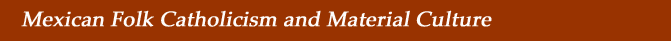
<style>
.page{position:relative;width:671px;height:41px;background:#993300}
.page>*{position:absolute;margin:0}
.t1{font:21px "PalatinoLinotype-Roman";color:#fdfcfb;font-weight:bold;font-style:italic}
</style>
<div class="page">
<p class="t1" style="left:21px;top:10px;width:471px;height:17px">Mexican Folk Catholicism and Material Culture</p>
</div>
